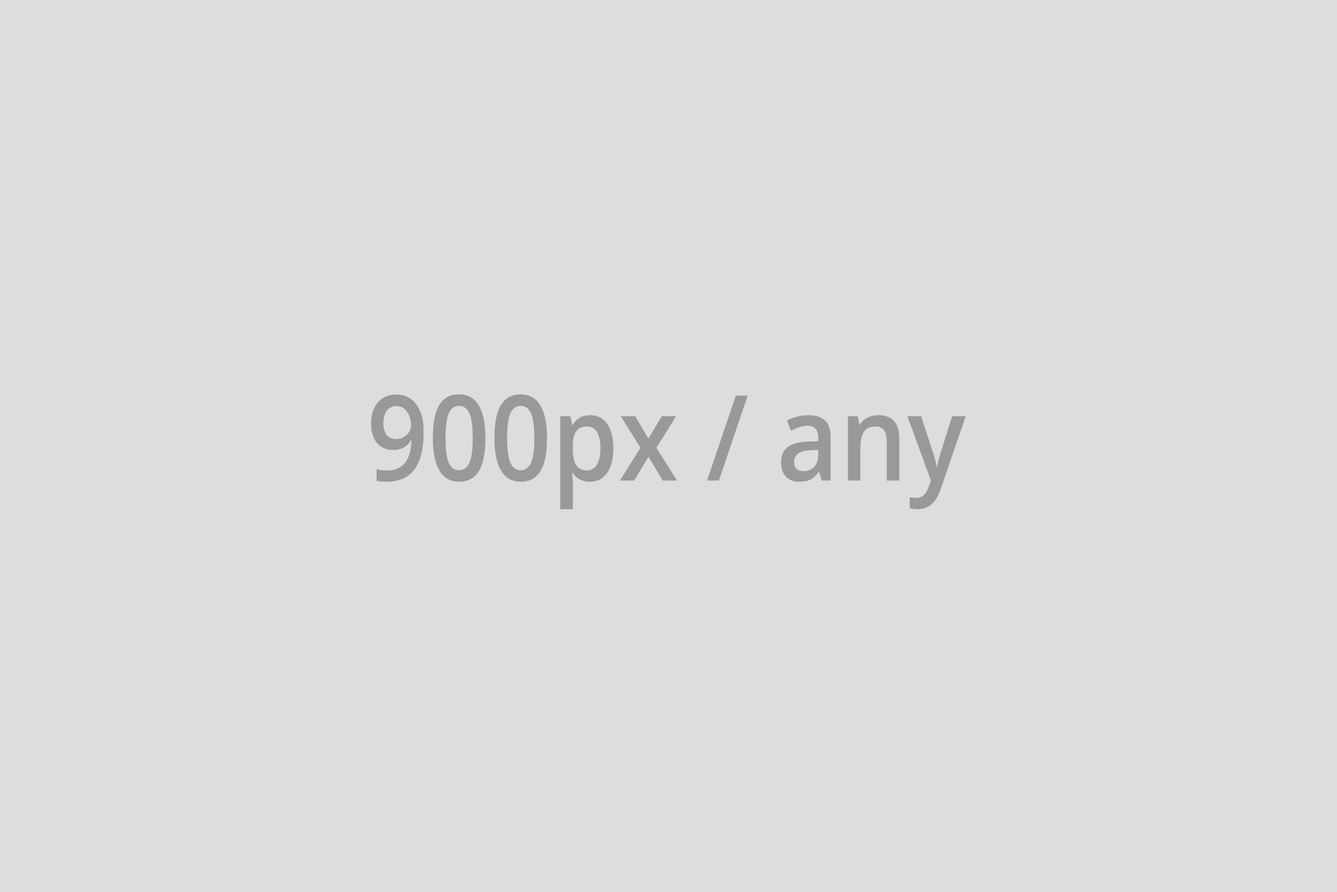
<style>
.page{position:relative;width:1337px;height:892px;background:#dddddd}
.page>*{position:absolute;margin:0}
.t1{font:118.8px "OpenSans-Semibold";color:#999999;scale:0.91 1}
</style>
<div class="page">
<p class="t1" style="left:371px;top:394px;width:595px;height:115px">900px / any</p>
</div>
